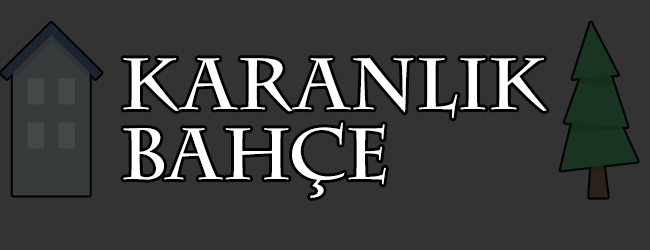
<style>
.page{position:relative;width:650px;height:250px;background:#333333}
.page>*{position:absolute;margin:0}
.t1{font:72px/70px "CharlemagneStd-Bold";color:#ffffff}
</style>
<div class="page">
<p class="t1" style="left:123px;top:58px;width:424px;height:140px">KARANLIK<br>BAHÇE</p>
</div>
